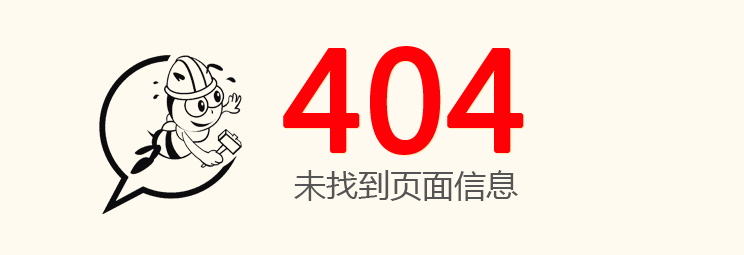
<style>
.page{position:relative;width:744px;height:255px;background:#fefaef}
.page>*{position:absolute;margin:0}
.t1{font:133.3px "MicrosoftYaHei";color:#fe0006;font-weight:bold}
.t2{font:32px "MicrosoftYaHei";color:#555555}
</style>
<div class="page">
<p class="t1" style="left:283px;top:46px;width:241px;height:109px">404</p>
<p class="t1" style="left:284px;top:47px;width:241px;height:109px">404</p>
<p class="t2" style="left:294px;top:170px;width:224px;height:31px">未找到页面信息</p>
</div>
